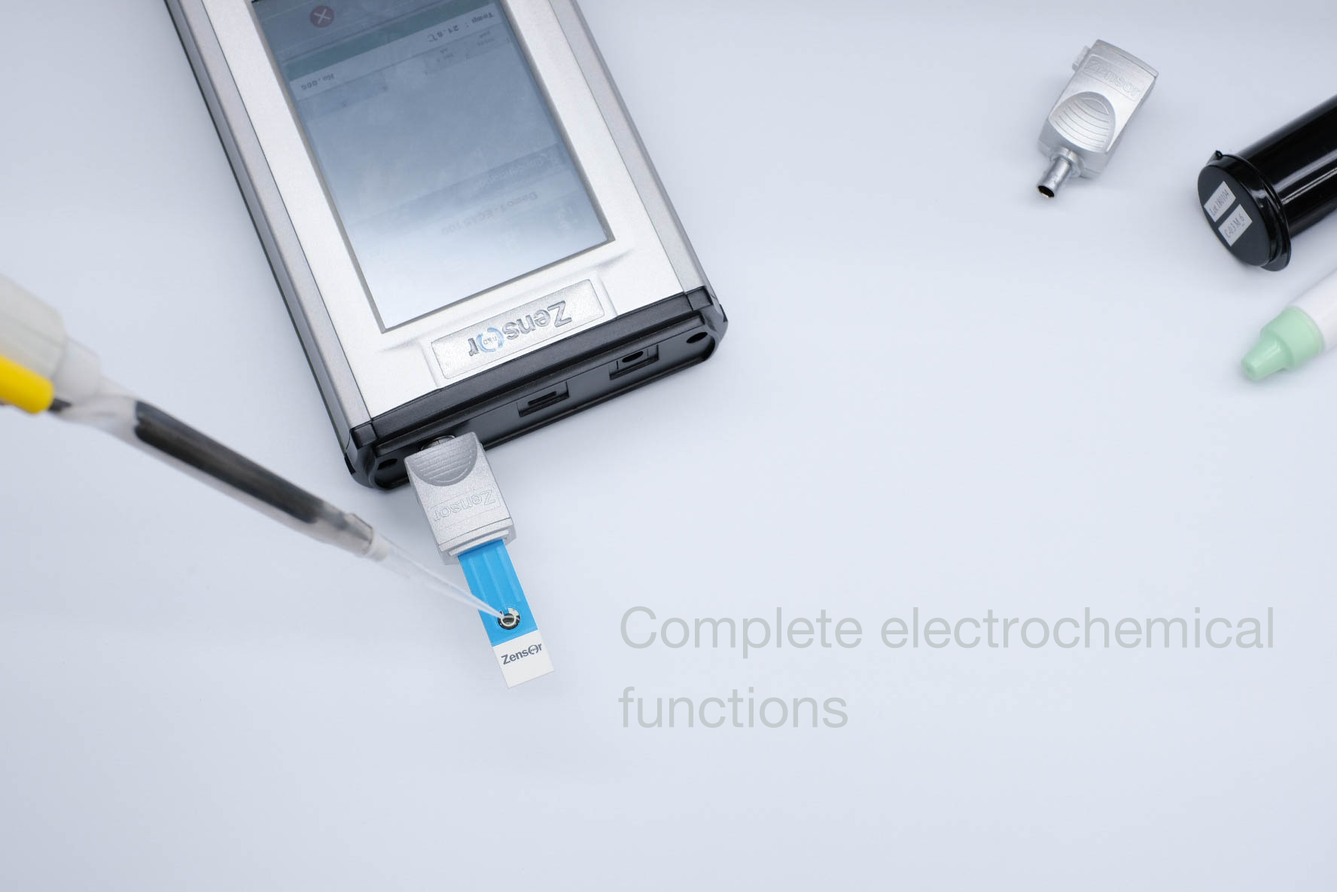
<style>
.page{position:relative;width:1337px;height:892px}
.page>*{position:absolute;margin:0}
.t1{font:56.3px "HelveticaNeue";color:#c5cccf}
.t2{font:56.4px "HelveticaNeue";color:#c5cccf}
</style>
<div class="page">
<p class="t1" style="left:621px;top:605px;width:652px;height:54px">Complete electrochemical</p>
<p class="t2" style="left:618px;top:686px;width:230px;height:41px">functions</p>
</div>
